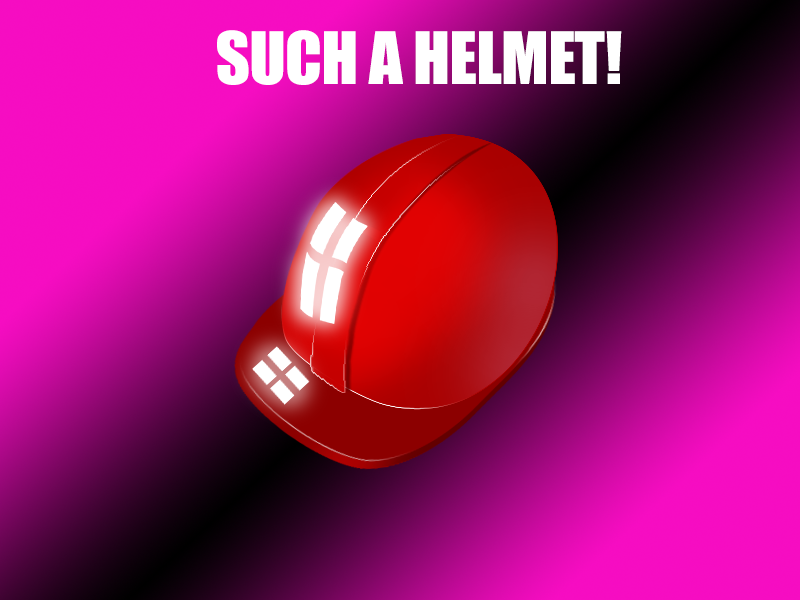
<style>
.page{position:relative;width:800px;height:600px}
.page>*{position:absolute;margin:0}
.t1{font:66.7px "Impact";letter-spacing:-0.01em;color:#ffffff}
</style>
<div class="page">
<p class="t1" style="left:217px;top:30px;width:405px;height:55px">SUCH A HELMET!</p>
</div>
